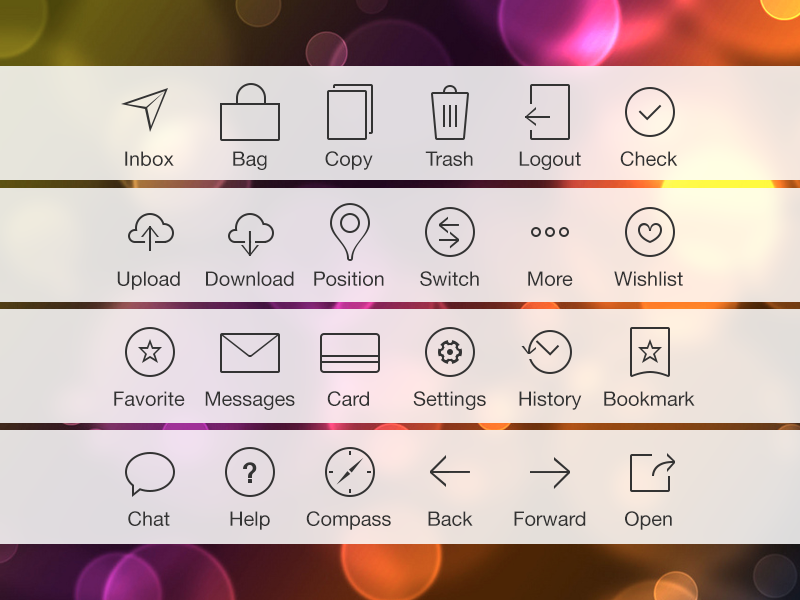
<style>
.page{position:relative;width:800px;height:600px}
.page>*{position:absolute;margin:0}
.t1{font:20px/120px "HelveticaNeue";color:#333333}
</style>
<div class="page">
<p class="t1" style="left:114px;top:151px;width:71px;height:375px;text-align:center">Inbox<br>Upload<br>Favorite<br>Chat</p>
<p class="t1" style="left:205px;top:151px;width:90px;height:379px;text-align:center">Bag<br>Download<br>Messages<br>Help</p>
<p class="t1" style="left:306px;top:151px;width:85px;height:379px;text-align:center">Copy<br>Position<br>Card<br>Compass</p>
<p class="t1" style="left:413px;top:151px;width:73px;height:375px;text-align:center">Trash<br>Switch<br>Settings<br>Back</p>
<p class="t1" style="left:514px;top:151px;width:72px;height:375px;text-align:center">Logout<br>More<br>History<br>Forward</p>
<p class="t1" style="left:604px;top:151px;width:91px;height:379px;text-align:center">Check<br>Wishlist<br>Bookmark<br>Open</p>
</div>
